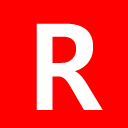
<style>
.page{position:relative;width:128px;height:128px;background:#ff0000}
.page>*{position:absolute;margin:0}
.t1{font:120px "MalgunGothicBold";letter-spacing:-0.05em;color:#ffffff;scale:0.95 1}
</style>
<div class="page">
<p class="t1" style="left:36px;top:23px;width:67px;height:87px">R</p>
</div>
